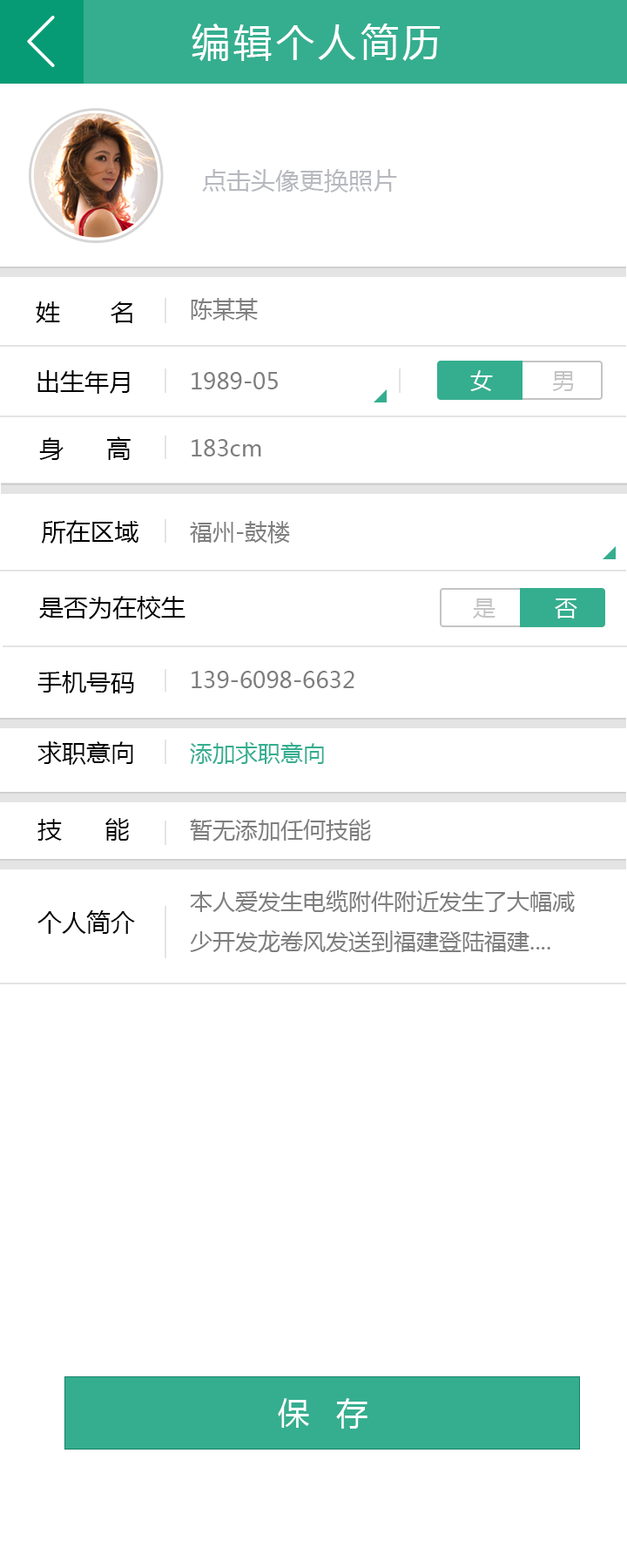
<style>
.page{position:relative;width:627px;height:1568px;background:#ffffff}
.page>*{position:absolute;margin:0}
.t1{font:38.3px "MicrosoftYaHei";letter-spacing:0.1em;color:#ffffff}
.t2{font:24.4px "MicrosoftYaHei";color:#b7b9bf}
.t3{font:24.4px/69.7px "MicrosoftYaHei";color:#000000}
.t4{font:22.6px "MicrosoftYaHei";color:#7e7e7e}
.t5{font:22.6px "MicrosoftYaHei";color:#ffffff}
.t6{font:22.6px "MicrosoftYaHei";color:#c4c4c4}
.t7{font:24.4px "MicrosoftYaHei";color:#000000}
.t8{font:22.6px "MicrosoftYaHei";color:#35ae8f}
.t9{font:31.4px "MicrosoftYaHei";color:#ffffff}
</style>
<div class="page">
<p class="t1" style="left:192px;top:24px;width:248px;height:37px">编辑个人简历</p>
<p class="t2" style="left:202px;top:169px;width:195px;height:24px">点击头像更换照片</p>
<p class="t3" style="left:36px;top:301px;width:96px;height:93px">姓       名<br>出生年月</p>
<p class="t4" style="left:191px;top:298px;width:67px;height:23px">陈某某</p>
<p class="t4" style="left:192px;top:372px;width:86px;height:17px">1989-05</p>
<p class="t5" style="left:470px;top:370px;width:23px;height:21px">女</p>
<p class="t6" style="left:552px;top:371px;width:22px;height:20px">男</p>
<p class="t7" style="left:39px;top:436px;width:92px;height:24px">身      高</p>
<p class="t4" style="left:192px;top:439px;width:69px;height:17px">183cm</p>
<p class="t7" style="left:41px;top:520px;width:98px;height:24px">所在区域</p>
<p class="t4" style="left:190px;top:521px;width:100px;height:23px">福州-鼓楼</p>
<p class="t7" style="left:39px;top:596px;width:147px;height:23px">是否为在校生</p>
<p class="t6" style="left:473px;top:598px;width:23px;height:20px">是</p>
<p class="t5" style="left:555px;top:598px;width:23px;height:20px">否</p>
<p class="t7" style="left:37px;top:671px;width:97px;height:22px">手机号码</p>
<p class="t4" style="left:192px;top:671px;width:163px;height:17px">139-6098-6632</p>
<p class="t7" style="left:37px;top:741px;width:96px;height:24px">求职意向</p>
<p class="t8" style="left:190px;top:742px;width:134px;height:22px">添加求职意向</p>
<p class="t7" style="left:37px;top:818px;width:92px;height:23px">技      能</p>
<p class="t4" style="left:190px;top:819px;width:181px;height:22px">暂无添加任何技能</p>
<p class="t4" style="left:190px;top:890px;width:385px;height:63px">本人爱发生电缆附件附近发生了大幅减<br>少开发龙卷风发送到福建登陆福建....</p>
<p class="t7" style="left:37px;top:910px;width:98px;height:24px">个人简介</p>
<p class="t9" style="left:278px;top:1398px;width:90px;height:31px">保   存</p>
</div>
